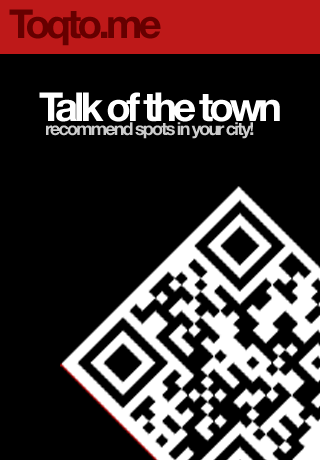
<style>
.page{position:relative;width:320px;height:460px;background:#000000}
.page>*{position:absolute;margin:0}
.t1{font:40px "HelveticaNeue-Bold";letter-spacing:-0.1em;color:#ffffff}
.t2{font:18px "HelveticaNeue-Bold";letter-spacing:-0.1em;color:#cccccc}
</style>
<div class="page">
<p class="t1" style="left:39px;top:92px;width:241px;height:30px">Talk of the town</p>
<p class="t2" style="left:46px;top:122px;width:208px;height:17px">recommend spots in your city!</p>
</div>
